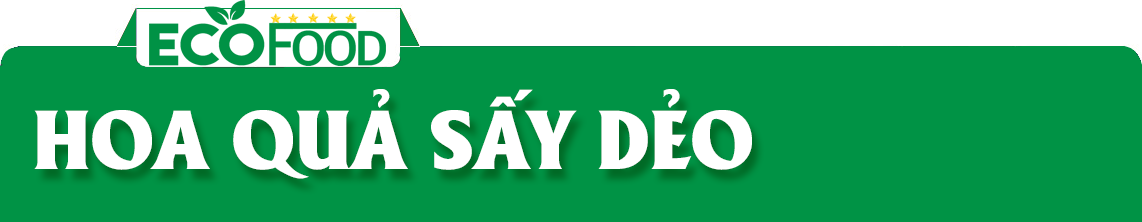
<style>
.page{position:relative;width:1142px;height:222px;background:#009345}
.page>*{position:absolute;margin:0}
.t1{font:81px "UTM-Alberta-Heavy";color:#ffffff}
</style>
<div class="page">
<p class="t1" style="left:34px;top:89px;width:718px;height:90px">HOA QUẢ SẤY DẺO</p>
</div>
